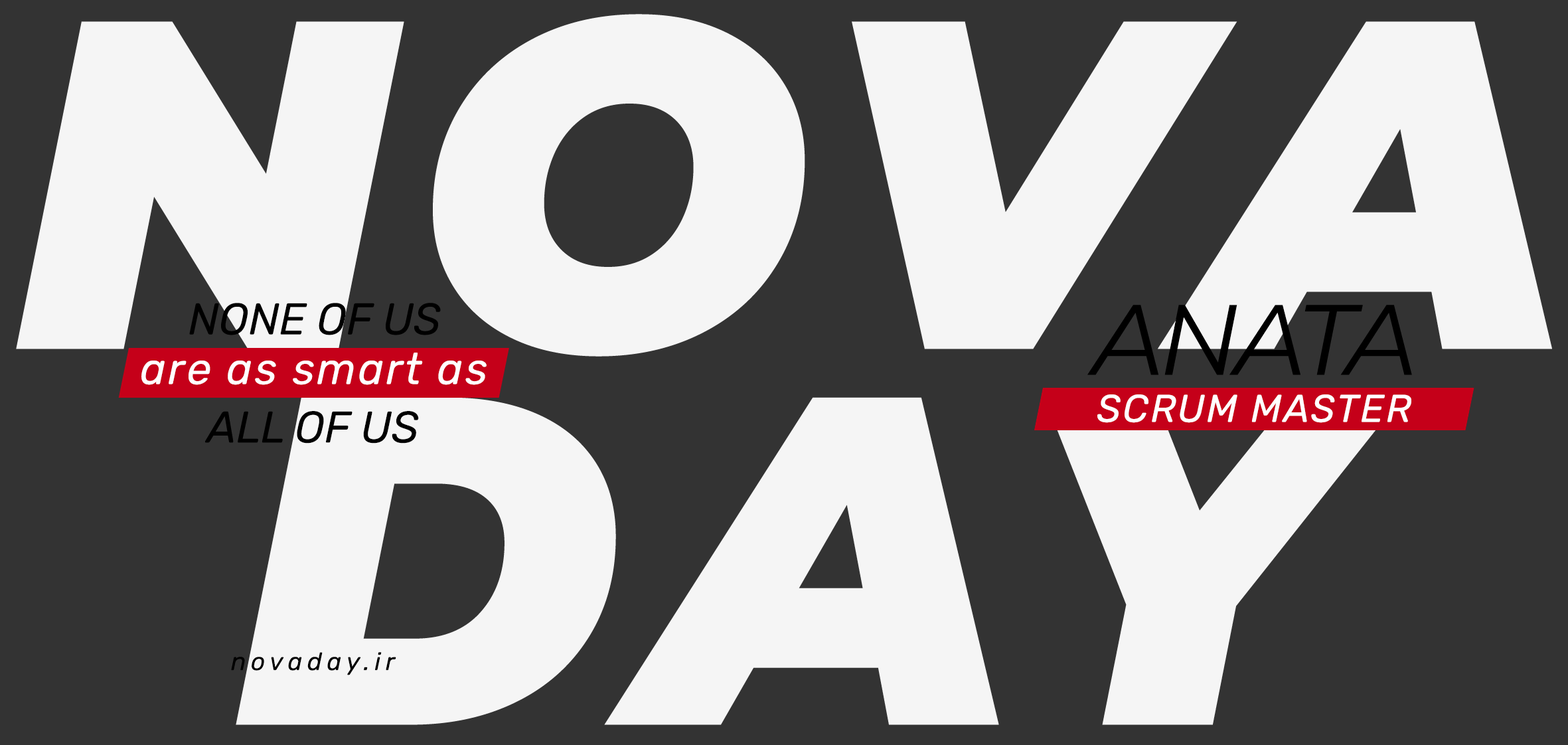
<style>
.page{position:relative;width:1568px;height:745px;background:#333333}
.page>*{position:absolute;margin:0}
.t1{font:467.1px/375.8px "Montserrat-BlackItalic";letter-spacing:0.05em;color:#f5f5f5}
.t2{font:44.3px "Rubik-Italic";color:#000000}
.t3{font:99.6px "Montserrat-Italic";letter-spacing:-0.05em;color:#000000}
.t4{font:44.3px "Rubik-Italic";letter-spacing:0.05em;color:#ffffff}
.t5{font:38.7px "Rubik-Italic";letter-spacing:0.05em;color:#ffffff}
.t6{font:24.9px "Rubik-Italic";letter-spacing:0.2em;color:#000000}
</style>
<div class="page">
<p class="t1" style="left:16px;top:14px;width:1536px;height:711px;text-align:center">NOVA<br>DAY</p>
<p class="t2" style="left:189px;top:303px;width:252px;height:32px">NONE OF US</p>
<p class="t3" style="left:1087px;top:305px;width:325px;height:70px">ANATA</p>
<p class="t4" style="left:141px;top:353px;width:346px;height:32px">are as smart as</p>
<p class="t5" style="left:1097px;top:394px;width:314px;height:29px">SCRUM MASTER</p>
<p class="t2" style="left:205px;top:411px;width:214px;height:32px">ALL OF US</p>
<p class="t6" style="left:231px;top:652px;width:165px;height:23px">novaday.ir</p>
</div>
